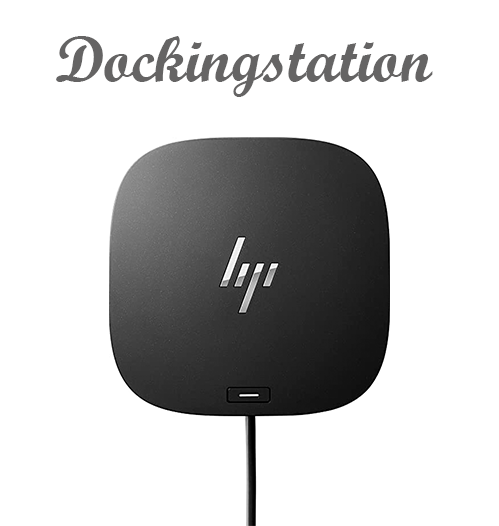
<style>
.page{position:relative;width:499px;height:526px;background:#ffffff}
.page>*{position:absolute;margin:0}
.t1{font:64px "ScriptMTBold";color:#656464}
</style>
<div class="page">
<p class="t1" style="left:56px;top:36px;width:377px;height:61px">Dockingstation</p>
</div>
